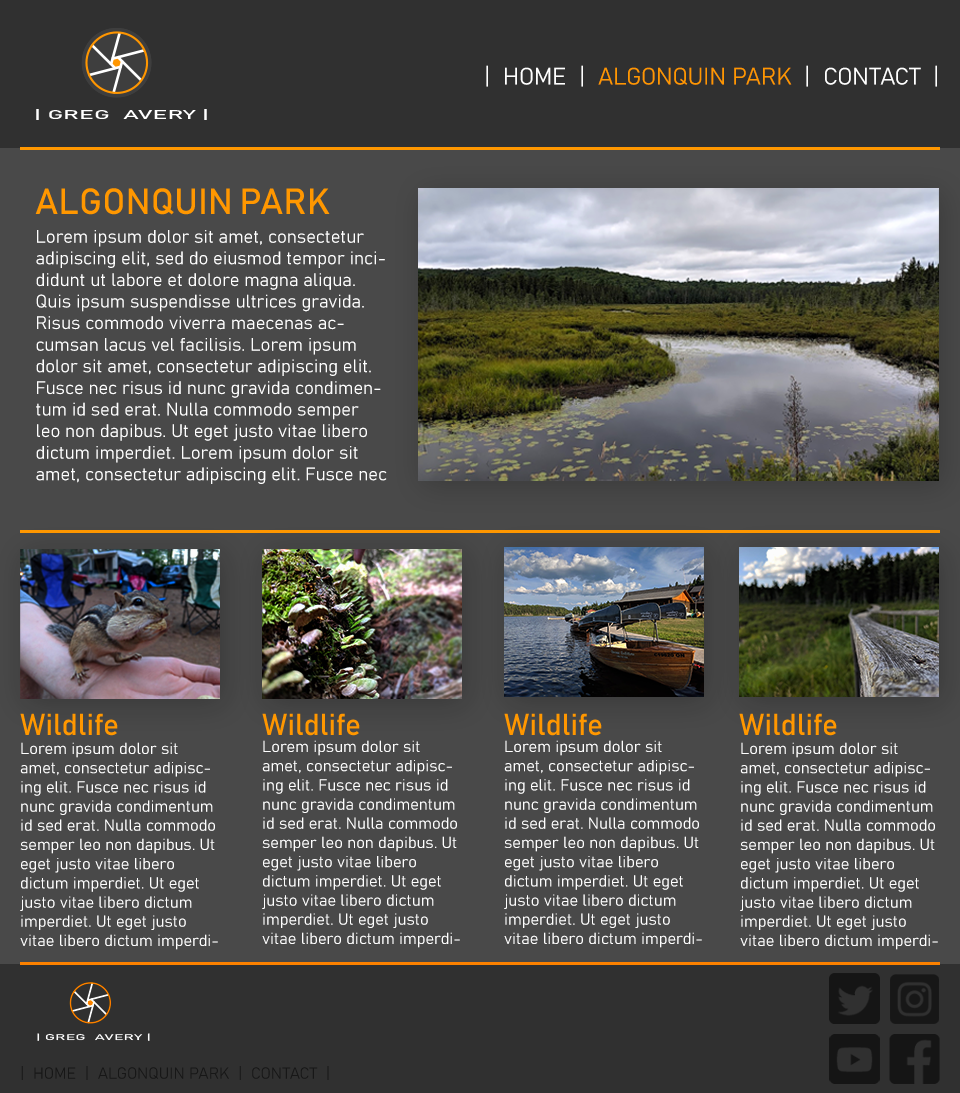
<style>
.page{position:relative;width:960px;height:1093px;background:#494949}
.page>*{position:absolute;margin:0}
.t1{font:23.5px "Bahnschrift";color:#ff9700;font-style:italic}
.t2{font:23.5px "Bahnschrift";color:#ffffff;font-style:italic}
.t3{font:36px "Bahnschrift";color:#ff9700;font-style:italic}
.t4{font:18px "Bahnschrift";color:#ffffff;font-style:italic}
.t5{font:30px "Bahnschrift";color:#ff9700;font-style:italic}
.t6{font:16px "Bahnschrift";color:#ffffff;font-style:italic}
.t7{font:16px "Bahnschrift_618wght";color:#1e1e1e;font-style:italic}
</style>
<div class="page">
<p class="t1" style="left:486px;top:65px;width:451px;height:22px"><span class="t2">|  HOME  |  </span>ALGONQUIN PARK<span class="t2">  |  CONTACT  |</span></p>
<p class="t3" style="left:35px;top:188px;width:295px;height:27px">ALGONQUIN PARK</p>
<p class="t4" style="left:36px;top:230px;width:351px;height:254px">Lorem ipsum dolor sit amet, consectetur adipiscing elit, sed do eiusmod tempor incididunt ut labore et dolore magna aliqua. Quis ipsum suspendisse ultrices gravida. Risus commodo viverra maecenas accumsan lacus vel facilisis. Lorem ipsum dolor sit amet, consectetur adipiscing elit. Fusce nec risus id nunc gravida condimentum id sed erat. Nulla commodo semper leo non dapibus. Ut eget justo vitae libero dictum imperdiet. Lorem ipsum dolor sit amet, consectetur adipiscing elit. Fusce nec risus id nunc gravida condimentum id sed erat. Nulla commodo semper leo non dapibus. Ut eget justo vitae libero dictum imperdiet.</p>
<p class="t5" style="left:20px;top:713px;width:98px;height:23px">Wildlife</p>
<p class="t5" style="left:262px;top:713px;width:98px;height:23px">Wildlife</p>
<p class="t5" style="left:504px;top:713px;width:98px;height:23px">Wildlife</p>
<p class="t5" style="left:739px;top:713px;width:98px;height:23px">Wildlife</p>
<p class="t6" style="left:20px;top:742px;width:198px;height:208px">Lorem ipsum dolor sit amet, consectetur adipiscing elit. Fusce nec risus id nunc gravida condimentum id sed erat. Nulla commodo semper leo non dapibus. Ut eget justo vitae libero dictum imperdiet. Ut eget justo vitae libero dictum imperdiet. Ut eget justo vitae libero dictum imperdiet.</p>
<p class="t6" style="left:262px;top:740px;width:198px;height:208px">Lorem ipsum dolor sit amet, consectetur adipiscing elit. Fusce nec risus id nunc gravida condimentum id sed erat. Nulla commodo semper leo non dapibus. Ut eget justo vitae libero dictum imperdiet. Ut eget justo vitae libero dictum imperdiet. Ut eget justo vitae libero dictum imperdiet.</p>
<p class="t6" style="left:504px;top:740px;width:198px;height:208px">Lorem ipsum dolor sit amet, consectetur adipiscing elit. Fusce nec risus id nunc gravida condimentum id sed erat. Nulla commodo semper leo non dapibus. Ut eget justo vitae libero dictum imperdiet. Ut eget justo vitae libero dictum imperdiet. Ut eget justo vitae libero dictum imperdiet.</p>
<p class="t6" style="left:740px;top:742px;width:198px;height:208px">Lorem ipsum dolor sit amet, consectetur adipiscing elit. Fusce nec risus id nunc gravida condimentum id sed erat. Nulla commodo semper leo non dapibus. Ut eget justo vitae libero dictum imperdiet. Ut eget justo vitae libero dictum imperdiet. Ut eget justo vitae libero dictum imperdiet.</p>
<p class="t7" style="left:21px;top:1066px;width:308px;height:14px">|  HOME  |  ALGONQUIN PARK  |  CONTACT  |</p>
</div>
